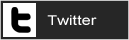
<style>
.page{position:relative;width:129px;height:40px;background:#262626}
.page>*{position:absolute;margin:0}
.t1{font:13.6px "ArialMT";color:#ffffff;scale:1.21 1}
</style>
<div class="page">
<p class="t1" style="left:47px;top:15px;width:50px;height:10px">Twitter</p>
</div>
